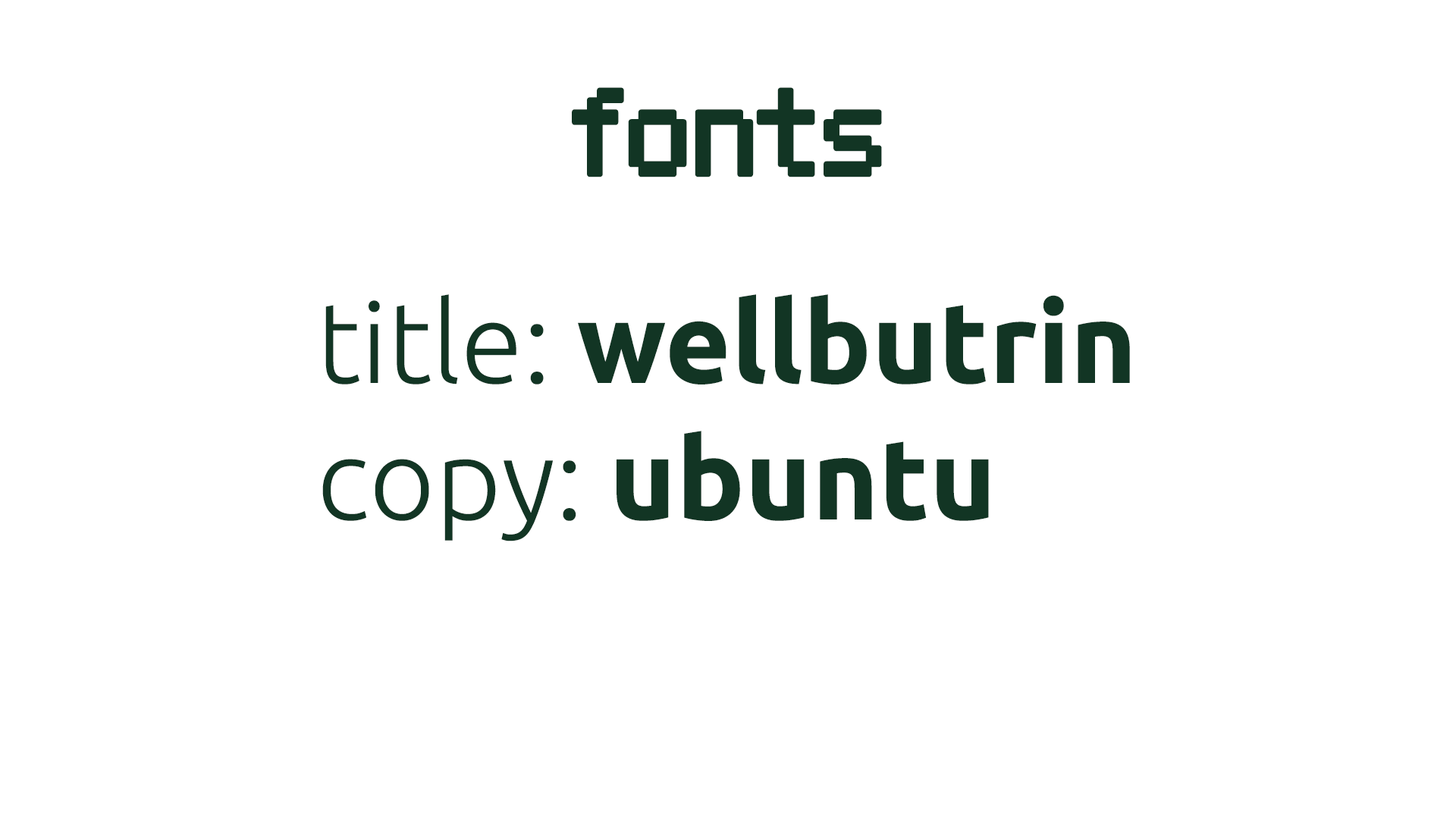
<style>
.page{position:relative;width:1456px;height:819px;background:#ffffff}
.page>*{position:absolute;margin:0}
.t1{font:113.7px "Wellbutrin";color:#123524}
.t2{font:113.7px "Ubuntu-Bold";color:#123524}
.t3{font:113.7px "Ubuntu-Light";color:#123524}
</style>
<div class="page">
<p class="t1" style="left:572px;top:87px;width:310px;height:90px">fonts</p>
<p class="t2" style="left:322px;top:294px;width:808px;height:247px"><span class="t3">title: </span>wellbutrin<br><span class="t3">copy: </span>ubuntu</p>
</div>
